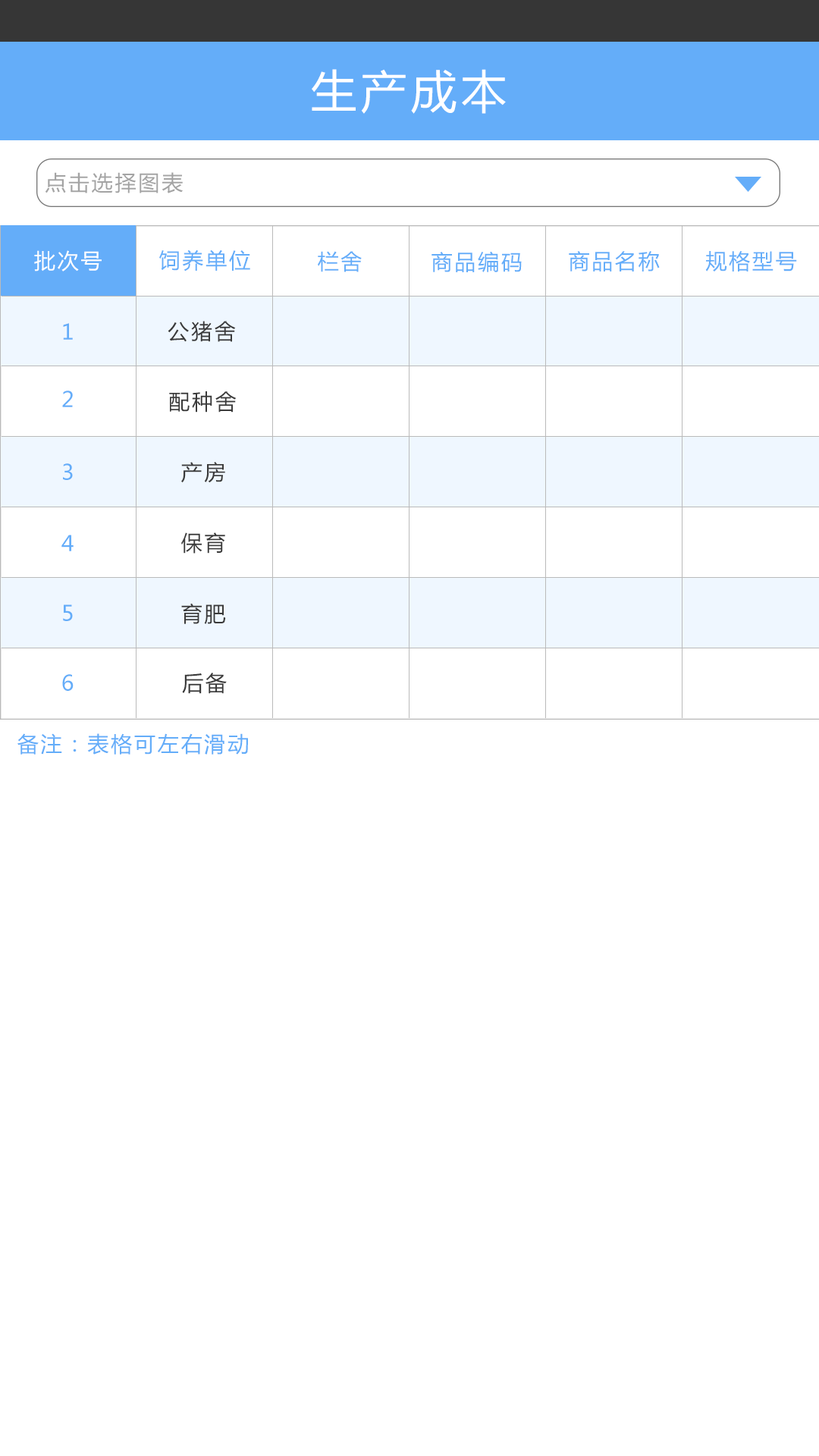
<style>
.page{position:relative;width:819px;height:1456px;background:#ffffff}
.page>*{position:absolute;margin:0}
.t1{font:45.5px "MicrosoftYaHei";letter-spacing:0.1em;color:#ffffff}
.t2{font:21.2px "MicrosoftYaHei";letter-spacing:0.1em;color:#a4a4a4}
.t3{font:21.2px "MicrosoftYaHei";letter-spacing:0.1em;color:#ffffff}
.t4{font:21.2px "MicrosoftYaHei";letter-spacing:0.1em;color:#64adf9}
.t5{font:21.2px "MicrosoftYaHei";letter-spacing:0.1em;color:#3a3a3a}
</style>
<div class="page">
<p class="t1" style="left:312px;top:69px;width:194px;height:45px">生产成本</p>
<p class="t2" style="left:45px;top:172px;width:138px;height:21px">点击选择图表</p>
<p class="t3" style="left:34px;top:250px;width:68px;height:21px">批次号</p>
<p class="t4" style="left:159px;top:249px;width:91px;height:22px">饲养单位</p>
<p class="t4" style="left:318px;top:251px;width:44px;height:21px">栏舍</p>
<p class="t4" style="left:431px;top:251px;width:91px;height:21px">商品编码</p>
<p class="t4" style="left:569px;top:251px;width:91px;height:20px">商品名称</p>
<p class="t4" style="left:705px;top:251px;width:92px;height:20px">规格型号</p>
<p class="t4" style="left:63px;top:323px;width:10px;height:17px">1</p>
<p class="t5" style="left:168px;top:321px;width:68px;height:21px">公猪舍</p>
<p class="t4" style="left:62px;top:391px;width:11px;height:16px">2</p>
<p class="t5" style="left:169px;top:391px;width:68px;height:22px">配种舍</p>
<p class="t5" style="left:181px;top:462px;width:44px;height:21px">产房</p>
<p class="t4" style="left:63px;top:463px;width:10px;height:17px">3</p>
<p class="t5" style="left:181px;top:532px;width:44px;height:22px">保育</p>
<p class="t4" style="left:61px;top:535px;width:13px;height:16px">4</p>
<p class="t4" style="left:63px;top:604px;width:10px;height:17px">5</p>
<p class="t5" style="left:181px;top:603px;width:45px;height:21px">育肥</p>
<p class="t4" style="left:62px;top:674px;width:12px;height:17px">6</p>
<p class="t5" style="left:182px;top:673px;width:45px;height:21px">后备</p>
<p class="t4" style="left:17px;top:733px;width:231px;height:22px">备注：表格可左右滑动</p>
</div>
